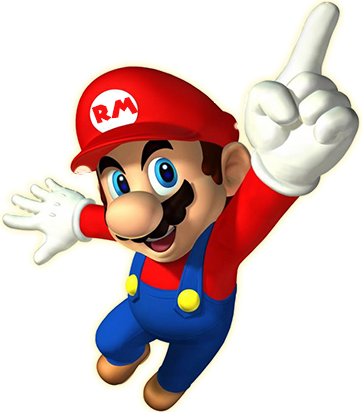
<style>
.page{position:relative;width:362px;height:412px;background:#ffffff}
.page>*{position:absolute;margin:0}
.t1{font:24px "SuperMarioGalaxy";color:#f2100e}
</style>
<div class="page">
<p class="t1" style="left:91px;top:96px;width:48px;height:28px;rotate:-16deg">rm</p>
</div>
